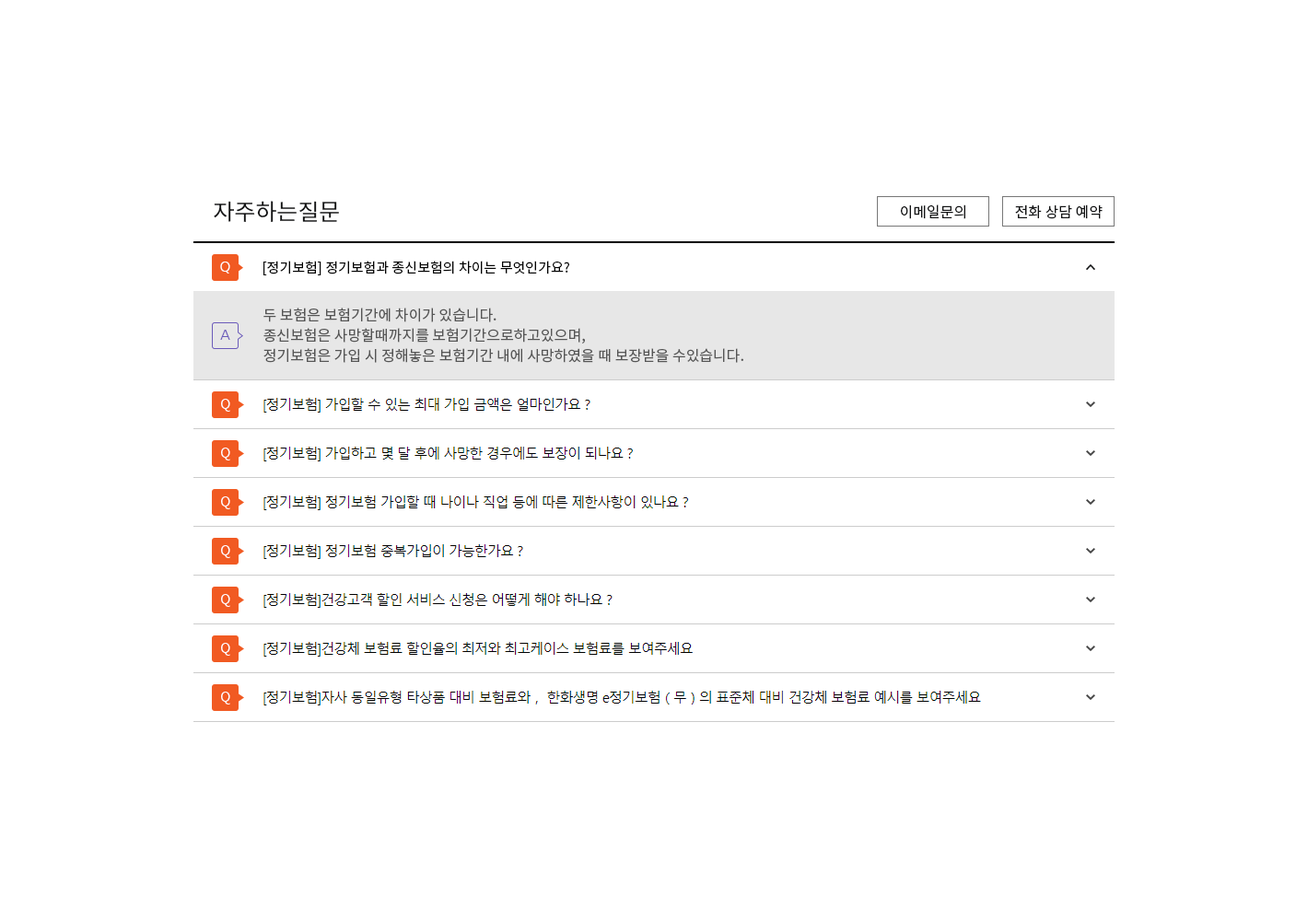
<style>
.page{position:relative;width:1296px;height:920px;background:#ffffff}
.page>*{position:absolute;margin:0}
.t1{font:22.6px "NotoSansKR-Regular";letter-spacing:-0.02em}
.t2{font:14.7px "NotoSansKR-Regular";color:#121314}
.t3{font:13.8px "NotoSansKR-Regular";letter-spacing:-0.02em}
.t4{font:14.7px/48.8px "NotoSansKR-Regular";letter-spacing:-0.024em}
.t5{font:14.7px/137.2px "NotoSansKR-Regular";letter-spacing:-0.05em}
.t6{font:14.7px/56.2px "NotoSansKR-Regular"}
.t7{font:14.7px/20.3px "NotoSansKR-Regular";color:#555555}
.t8{font:13.8px "NotoSansKR-Regular";letter-spacing:-0.02em;color:#ffffff}
</style>
<div class="page">
<p class="t1" style="left:214px;top:201px;width:125px;height:22px">자주하는 질문</p>
<p class="t2" style="left:901px;top:204px;width:64px;height:15px">이메일문의</p>
<p class="t2" style="left:1015px;top:204px;width:88px;height:15px">전화 상담 예약</p>
<p class="t3" style="left:221px;top:262px;width:9px;height:12px">Q</p>
<p class="t4" style="left:263px;top:260px;width:728px;height:446px"><span class="t5">[정기보험] 정기보험과 종신보험의 차이는 무엇인가요?<br></span>[정기보험] 가입할 수있는 최대 가입 금액은 얼마인가요?<br>[정기보험] 가입하고 몇 달 후에 사망한 경우에도 보장이 되나요?<br>[정기보험] 정기보험 가입할 때 나이나 직업 등에 따른 제한사항이 있나요?<br>[정기보험] 정기보험 중복가입이 가능한가요?<br>[정기보험] 건강고객 할인 서비스 신청은 어떻게 해야하나요? <br>[정기보험] 건강체 보험료 할인율의 최저와 최고케이스 보험료를 보여주세요.<br><span class="t6">[정기보험] 자사 동일유형 타상품 대비 보험료와, 한화생명 e장기보험(무)의 표준체 대비 건강체 보험료 예시를 보여주세요.</span></p>
<p class="t7" style="left:263px;top:308px;width:484px;height:55px">두 보험은 보험기간에 차이가 있습니다.<br>종신보험은 사망할때까지를 보험기간으로 하고 있으며,<br>정기보험은 가입 시 정해놓은 보험기간 내에 사망하였을 때 보장받을 수 있습니다.</p>
<p class="t3" style="left:220px;top:330px;width:9px;height:10px">A</p>
<p class="t8" style="left:221px;top:399px;width:9px;height:13px">Q</p>
<p class="t8" style="left:221px;top:448px;width:9px;height:13px">Q</p>
<p class="t8" style="left:221px;top:496px;width:9px;height:13px">Q</p>
<p class="t8" style="left:221px;top:545px;width:9px;height:13px">Q</p>
<p class="t8" style="left:221px;top:594px;width:9px;height:13px">Q</p>
<p class="t8" style="left:221px;top:643px;width:9px;height:13px">Q</p>
<p class="t8" style="left:221px;top:692px;width:9px;height:13px">Q</p>
</div>
